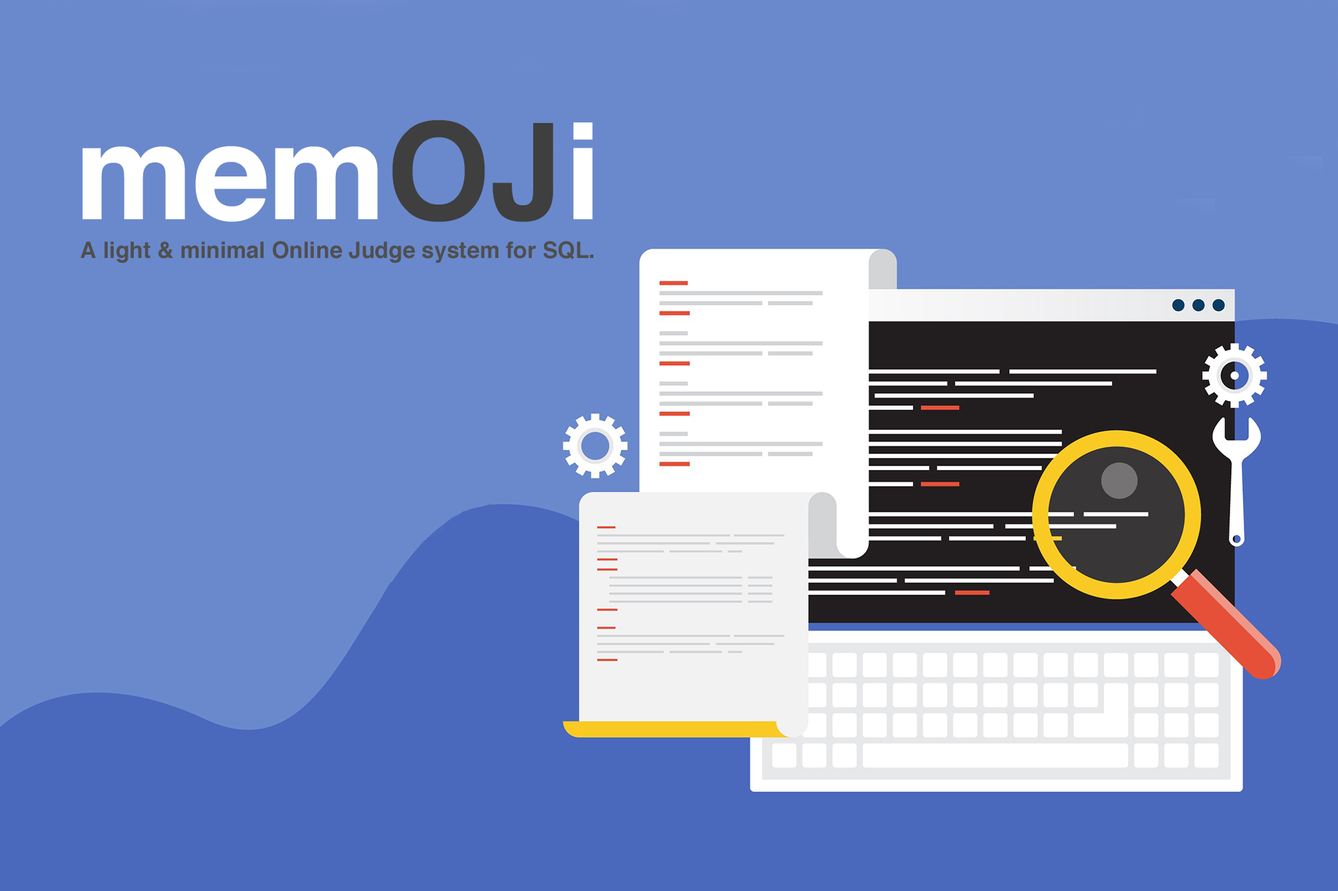
<style>
.page{position:relative;width:1338px;height:891px;background:#6a89cc}
.page>*{position:absolute;margin:0}
.t1{font:22.7px/67px "Helvetica-Bold";color:#4f4f4f}
.t2{font:133.6px/67px "Helvetica-Bold";color:#ffffff}
.t3{font:133.6px/67px "Helvetica-Bold";color:#3f3f3f}
</style>
<div class="page">
<p class="t1" style="left:80px;top:120px;width:513px;height:144px"><span class="t2">mem</span><span class="t3">OJ</span><span class="t2">i<br><br> </span>A light &amp; minimal Online Judge system for SQL.</p>
</div>
